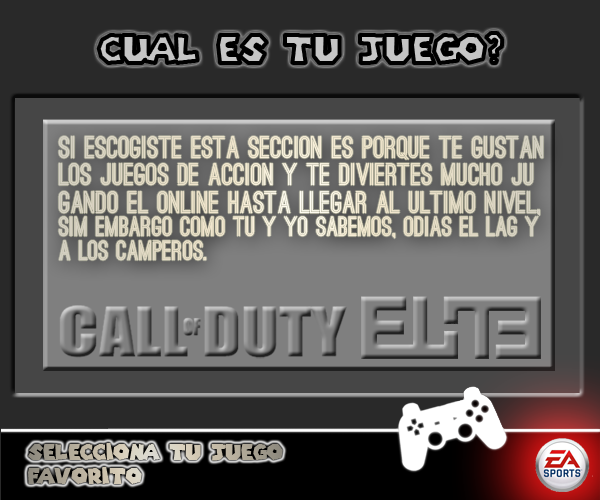
<style>
.page{position:relative;width:600px;height:500px;background:#292929}
.page>*{position:absolute;margin:0}
.t1{font:38.2px "SuperMarioGalaxy";scale:0.97 1}
.t2{font:29.4px "OstrichSans-Bold";color:#ece1cb;scale:0.97 1}
.t3{font:26.5px "OstrichSans-Bold";color:#ece1cb;scale:0.97 1}
.t4{font:21.6px/33px "SuperMarioGalaxy";scale:0.97 1}
</style>
<div class="page">
<p class="t1" style="left:98px;top:33px;width:405px;height:30px">Cual es tu juego?</p>
<p class="t2" style="left:58px;top:136px;width:486px;height:125px">Si escogiste esta seccion es porque te gustan <br>los juegos de accion y te diviertes mucho ju<br>gando el online hasta llegar al ultimo nivel,<br><span class="t3">sim embargo como tu y yo sabemos, odias el lag y <br>a los camperos.</span></p>
<p class="t4" style="left:28px;top:443px;width:255px;height:41px">Selecciona tu juego <br>favorito</p>
</div>
